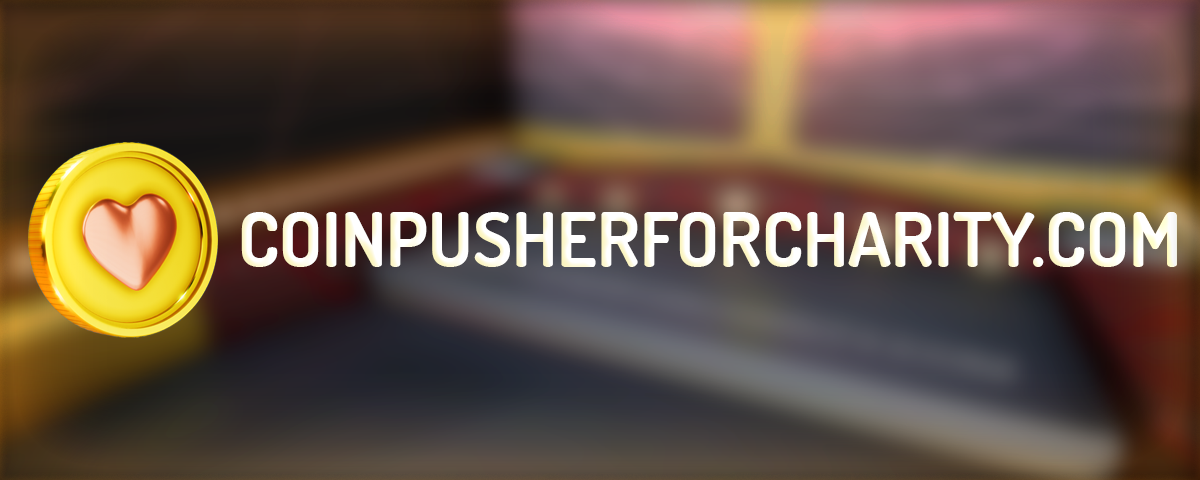
<style>
.page{position:relative;width:1200px;height:480px}
.page>*{position:absolute;margin:0}
.t1{font:75px "Dosis-Bold";color:#ffffff}
</style>
<div class="page">
<p class="t1" style="left:241px;top:212px;width:936px;height:55px">COINPUSHERFORCHARITY.COM</p>
</div>
